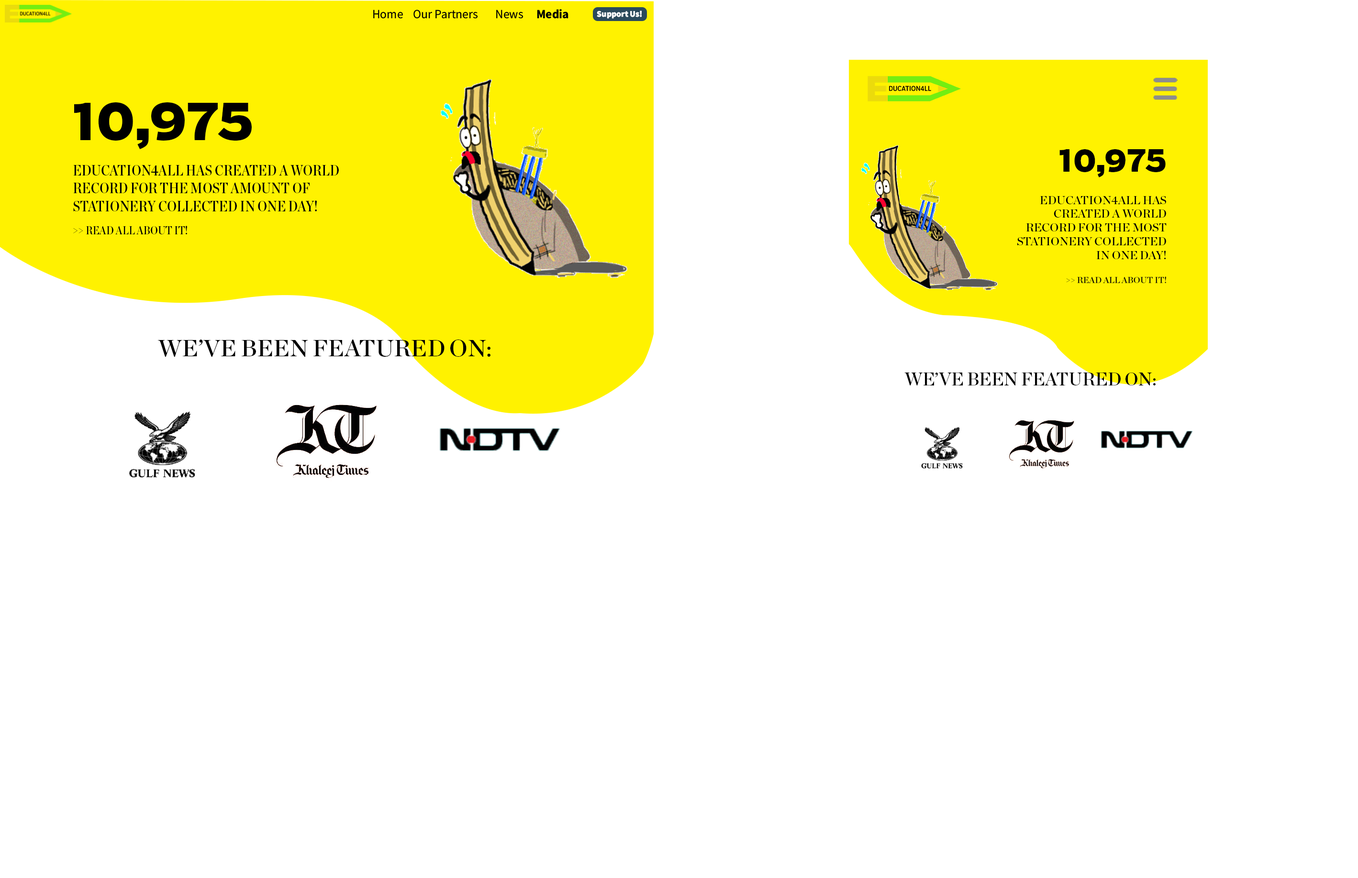
<style>
.page{position:relative;width:1358px;height:878px;background:#ffffff}
.page>*{position:absolute;margin:0}
.t1{font:12.4px "SourceSansRoman-Regular";color:#000000}
.t2{font:12.4px "SourceSansRoman-Bold";color:#000000}
.t3{font:8.7px "SourceSansRoman-Black";color:#ffffff}
.t4{font:52.1px "Boomer-ExtraBold";color:#000000;text-transform:uppercase}
.t5{font:31.1px "Boomer-ExtraBold";color:#000000;text-transform:uppercase}
.t6{font:14.8px "ChronicleDispCond-Semi";color:#000000;text-transform:uppercase}
.t7{font:11.5px "ChronicleDispCond-Semi";color:#000000;text-transform:uppercase}
.t8{font:11.5px "ChronicleDisplay-Semi";color:#000000;text-transform:uppercase}
.t9{font:8.6px "ChronicleDisplay-Semi";color:#000000;text-transform:uppercase}
.t10{font:23.4px "ChronicleDisplay-Semi";color:#000000;text-transform:uppercase}
.t11{font:17.7px "ChronicleDisplay-Semi";color:#000000;text-transform:uppercase}
</style>
<div class="page">
<p class="t1" style="left:373px;top:9px;width:195px;height:10px">Home Our Partners  News  <span class="t2">Media</span></p>
<p class="t3" style="left:597px;top:11px;width:45px;height:8px">Support Us!</p>
<p class="t4" style="left:74px;top:102px;width:178px;height:47px">10,975</p>
<p class="t5" style="left:1059px;top:149px;width:106px;height:28px">10,975</p>
<p class="t6" style="left:73px;top:165px;width:266px;height:69px">Education4All has created a world record for the most amount of stationery collected in one day!<br><span class="t7">&gt;&gt; Read all about it!</span></p>
<p class="t8" style="left:1017px;top:196px;width:149px;height:87px;text-align:right">Education4All has created a world record for the most stationery collected in one day!<br><br><span class="t9">&gt;&gt; Read all about it!</span></p>
<p class="t10" style="left:157px;top:340px;width:333px;height:17px">We’ve been featured on:</p>
<p class="t11" style="left:904px;top:373px;width:251px;height:13px">We’ve been featured on:</p>
</div>
